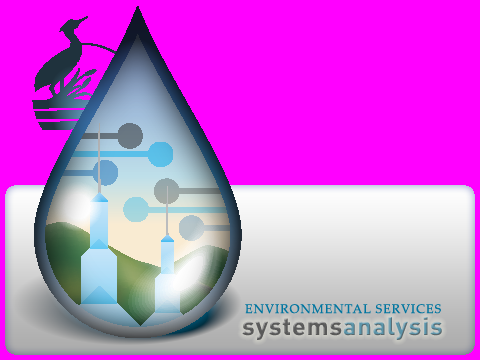
<style>
.page{position:relative;width:480px;height:360px;background:#ff00ff}
.page>*{position:absolute;margin:0}
.t1{font:12.5px "PalatinoLinotype-Roman";letter-spacing:0.08em;color:#0075a0}
.t2{font:25px "DIN-Bold";letter-spacing:0.04em}
</style>
<div class="page">
<p class="t1" style="left:245px;top:304px;width:196px;height:10px">ENVIRONMENTAL SERVICES</p>
<p class="t2" style="left:242px;top:317px;width:200px;height:23px">systemsanalysis</p>
</div>
